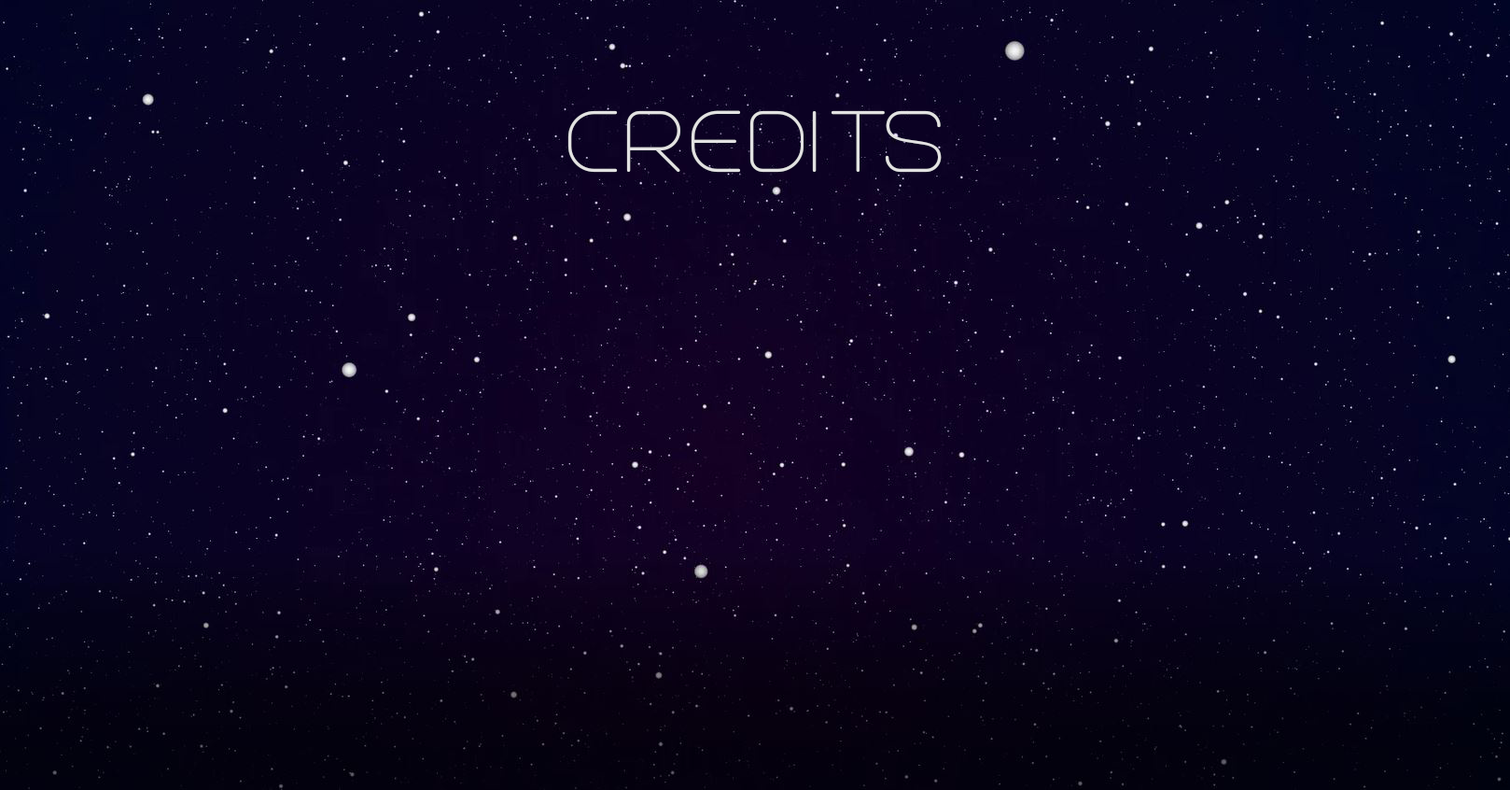
<style>
.page{position:relative;width:1510px;height:790px}
.page>*{position:absolute;margin:0}
.t1{font:108.9px "Trench-Thin";color:#e2e2e2}
</style>
<div class="page">
<p class="t1" style="left:567px;top:110px;width:375px;height:63px">CREDITS</p>
</div>
